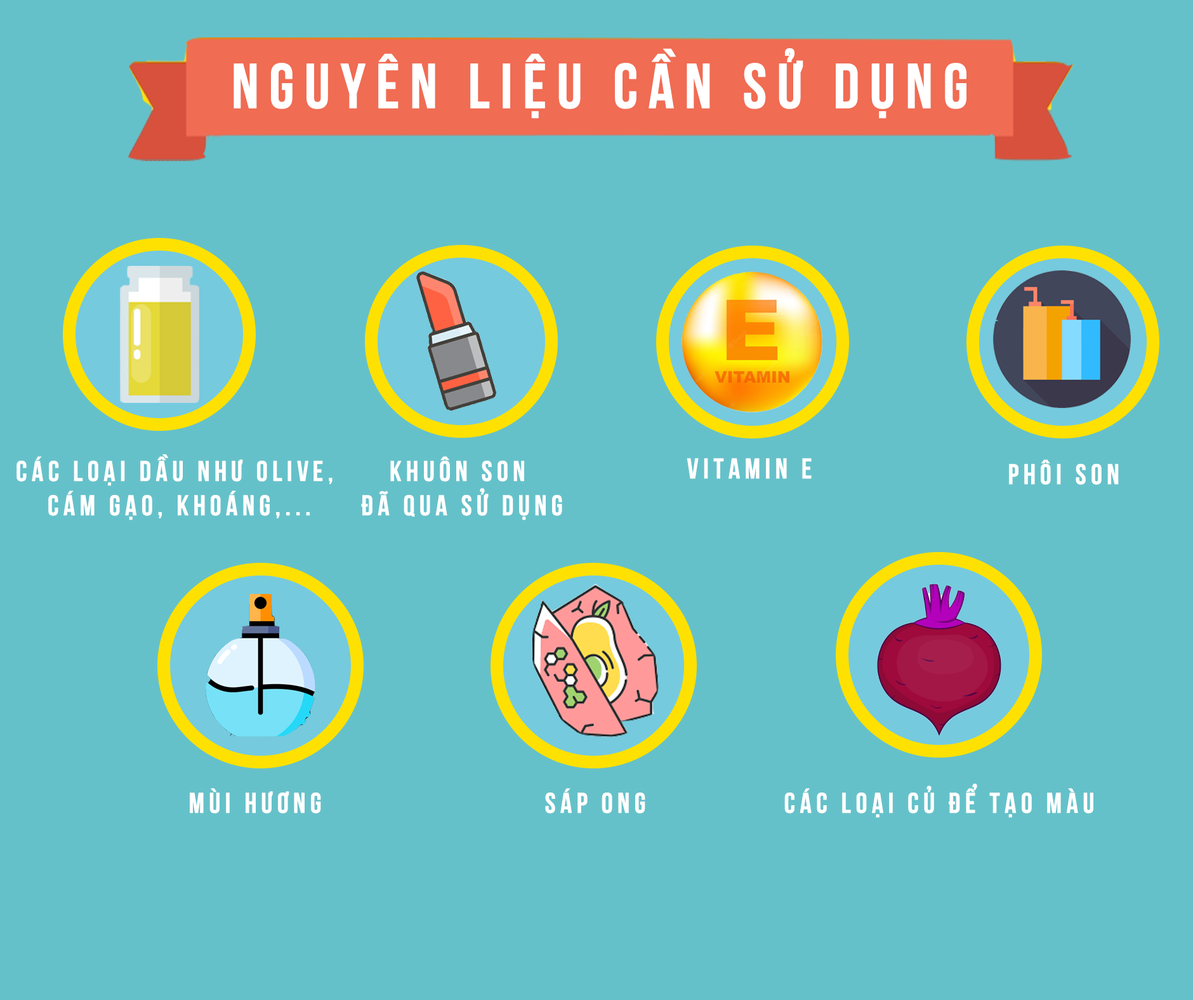
<style>
.page{position:relative;width:1193px;height:1000px;background:#65c1c9}
.page>*{position:absolute;margin:0}
.t1{font:63.4px "UTM-Bebas";letter-spacing:0.14em;color:#ffffff;font-weight:bold}
.t2{font:28.5px "UTM-Bebas";letter-spacing:0.14em;color:#ffffff;font-weight:bold}
</style>
<div class="page">
<p class="t1" style="left:233px;top:48px;width:733px;height:71px">NGUYÊN LIỆU CẦN SỬ DỤNG</p>
<p class="t2" style="left:16px;top:454px;width:316px;height:66px;text-align:center">các loại dầu như olive, <br>cám gạo, khoáng,...</p>
<p class="t2" style="left:361px;top:456px;width:201px;height:64px;text-align:center">khuôn son <br>đã qua sử dụng</p>
<p class="t2" style="left:686px;top:458px;width:125px;height:21px">Vitamin e</p>
<p class="t2" style="left:1009px;top:459px;width:109px;height:26px">phôi son</p>
<p class="t2" style="left:784px;top:783px;width:309px;height:35px">các loại củ để tạo màu</p>
<p class="t2" style="left:190px;top:788px;width:131px;height:25px">mùi hương</p>
<p class="t2" style="left:545px;top:788px;width:100px;height:25px">sáp ong</p>
</div>
